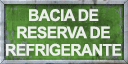
<style>
.page{position:relative;width:128px;height:64px}
.page>*{position:absolute;margin:0}
.t1{font:16px/17.3px "Arial-BoldMT";letter-spacing:-0.04em;color:#ffffff;text-transform:uppercase}
</style>
<div class="page">
<p class="t1" style="left:6px;top:9px;width:116px;height:47px;text-align:center;opacity:0.85">Bacia de<br>reserva de<br>refrigerante</p>
</div>
